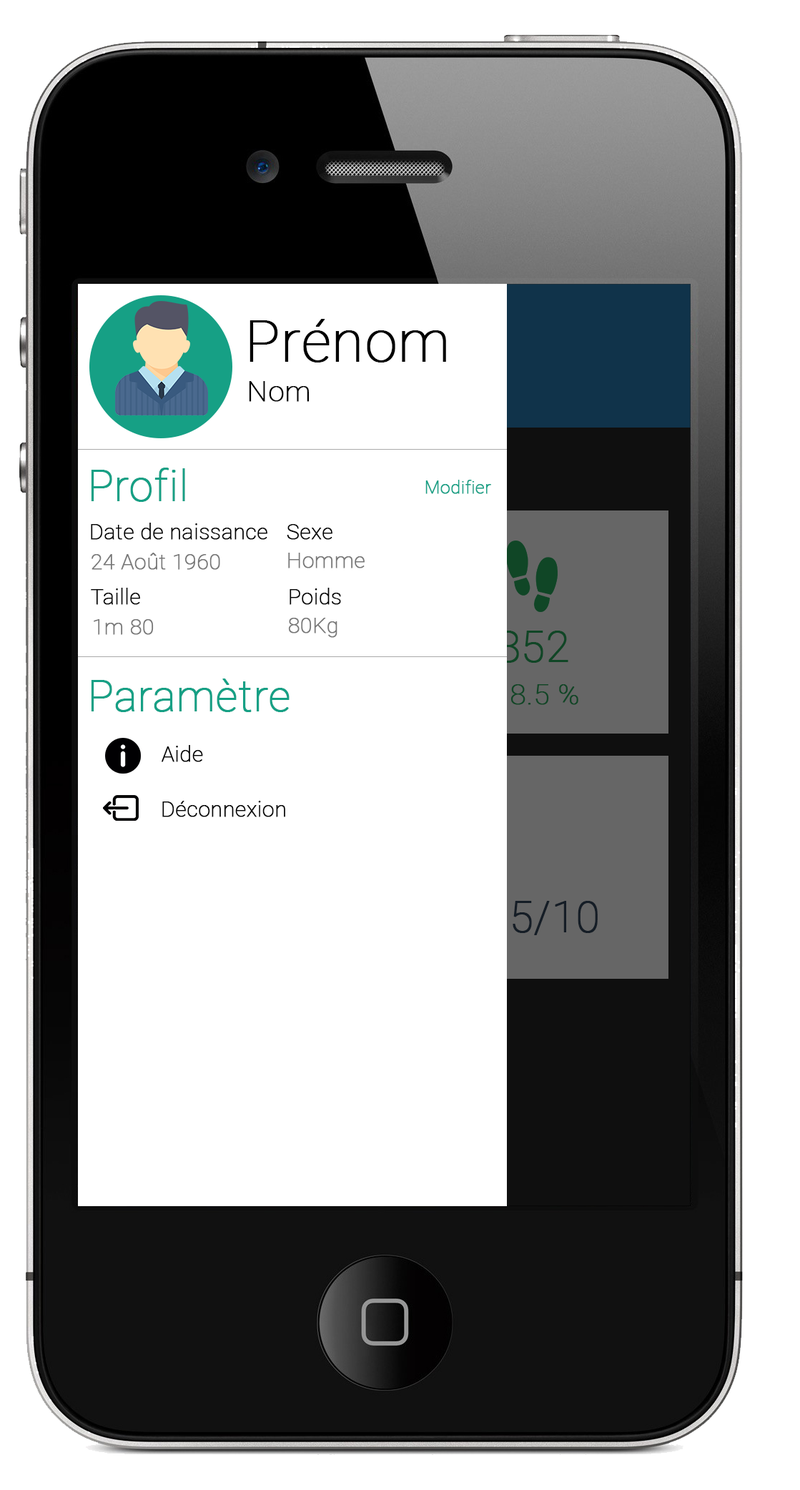
<style>
.page{position:relative;width:800px;height:1490px;background:#ffffff}
.page>*{position:absolute;margin:0}
.t1{font:57.2px "Roboto-Thin";color:#000000;font-weight:bold}
.t2{font:28.6px "Roboto-Thin";color:#000000;font-weight:bold}
.t3{font:42.9px "Roboto-Thin";color:#16a085;font-weight:bold}
.t4{font:17.9px "Roboto-Thin";color:#16a085;font-weight:bold}
.t5{font:21.5px "Roboto-Thin";color:#000000;font-weight:bold}
.t6{font:21.5px "Roboto-Thin";color:#777777;font-weight:bold}
.t7{font:42.9px "Roboto-Thin";color:#104626;font-weight:bold}
.t8{font:28.6px "Roboto-Thin";color:#104626;font-weight:bold}
</style>
<div class="page">
<p class="t1" style="left:250px;top:319px;width:196px;height:44px">Prénom</p>
<p class="t2" style="left:249px;top:381px;width:61px;height:21px">Nom</p>
<p class="t3" style="left:91px;top:468px;width:94px;height:34px">Profil</p>
<p class="t4" style="left:425px;top:480px;width:66px;height:14px">Modifier</p>
<p class="t5" style="left:91px;top:523px;width:176px;height:17px">Date de naissance</p>
<p class="t5" style="left:287px;top:524px;width:46px;height:16px">Sexe</p>
<p class="t6" style="left:92px;top:553px;width:128px;height:17px">24 Août 1960</p>
<p class="t6" style="left:288px;top:553px;width:77px;height:15px">Homme</p>
<p class="t5" style="left:91px;top:588px;width:49px;height:17px">Taille</p>
<p class="t5" style="left:290px;top:588px;width:51px;height:17px">Poids</p>
<p class="t6" style="left:288px;top:618px;width:50px;height:20px">80Kg</p>
<p class="t6" style="left:94px;top:619px;width:60px;height:16px">1m 80</p>
<p class="t7" style="left:498px;top:631px;width:70px;height:32px">852</p>
<p class="t3" style="left:91px;top:679px;width:199px;height:33px">Paramètre</p>
<p class="t8" style="left:486px;top:684px;width:92px;height:21px">+ 8.5 %</p>
<p class="t5" style="left:162px;top:745px;width:41px;height:17px">Aide</p>
<p class="t5" style="left:162px;top:801px;width:123px;height:16px">Déconnexion</p>
</div>
